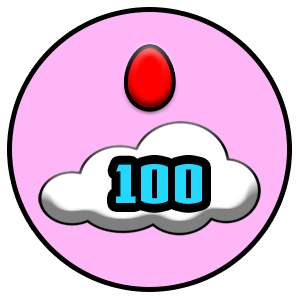
<style>
.page{position:relative;width:300px;height:300px;background:#ffb6f7}
.page>*{position:absolute;margin:0}
.t1{font:52.7px "IRONMANOFWAR002NCV";letter-spacing:0.01em;color:#22d8ff;scale:1.41 1}
</style>
<div class="page">
<p class="t1" style="left:116px;top:164px;width:86px;height:40px">100</p>
</div>
